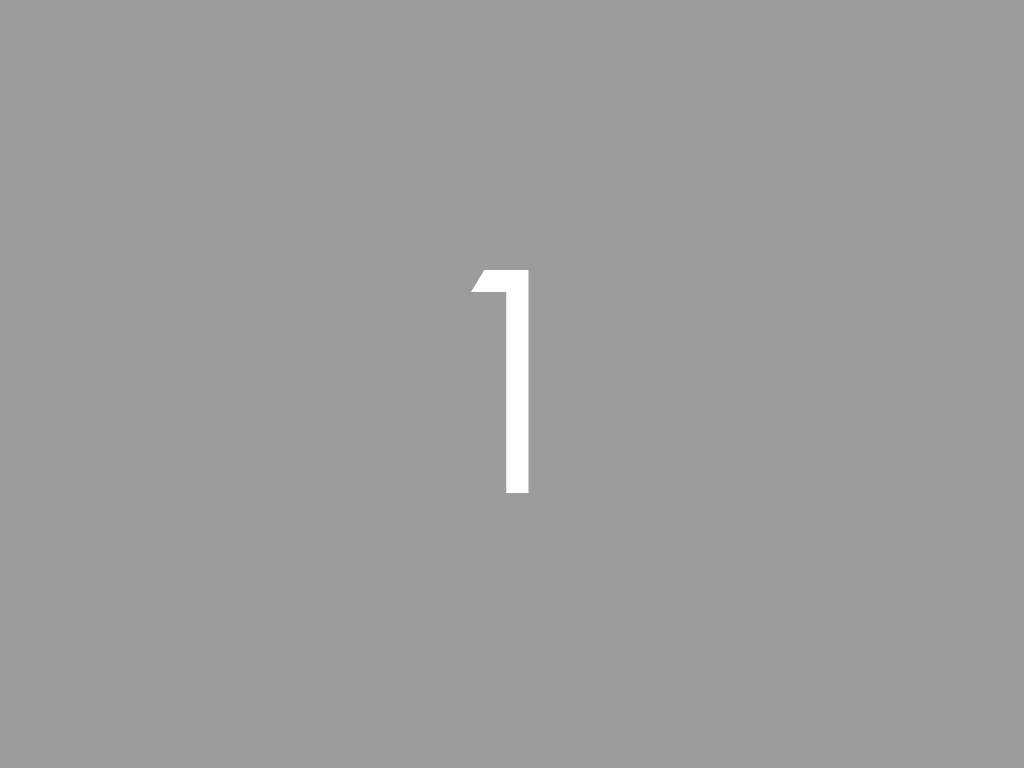
<style>
.page{position:relative;width:1024px;height:768px;background:#9c9c9c}
.page>*{position:absolute;margin:0}
.t1{font:311.1px "CenturyGothic";color:#ffffff}
</style>
<div class="page">
<p class="t1" style="left:471px;top:270px;width:58px;height:223px">1</p>
</div>
